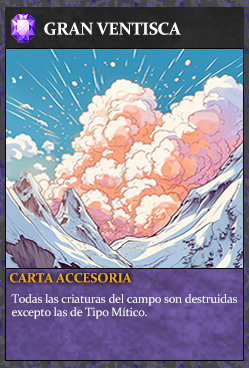
<style>
.page{position:relative;width:249px;height:368px}
.page>*{position:absolute;margin:0}
.t1{font:17.3px "Constantia-Bold";letter-spacing:-0.02em;color:#ffffff}
.t2{font:13.3px "Constantia-Bold";letter-spacing:-0.02em;color:#f2ac05}
.t3{font:12px/13.3px "Constantia";letter-spacing:-0.02em;color:#ffffff}
</style>
<div class="page">
<p class="t1" style="left:44px;top:22px;width:137px;height:13px">GRAN VENTISCA</p>
<p class="t2" style="left:10px;top:273px;width:122px;height:10px">CARTA ACCESORIA</p>
<p class="t3" style="left:11px;top:294px;width:226px;height:25px">Todas las criaturas del campo son destruidas<br>excepto las de Tipo Mítico.</p>
</div>
